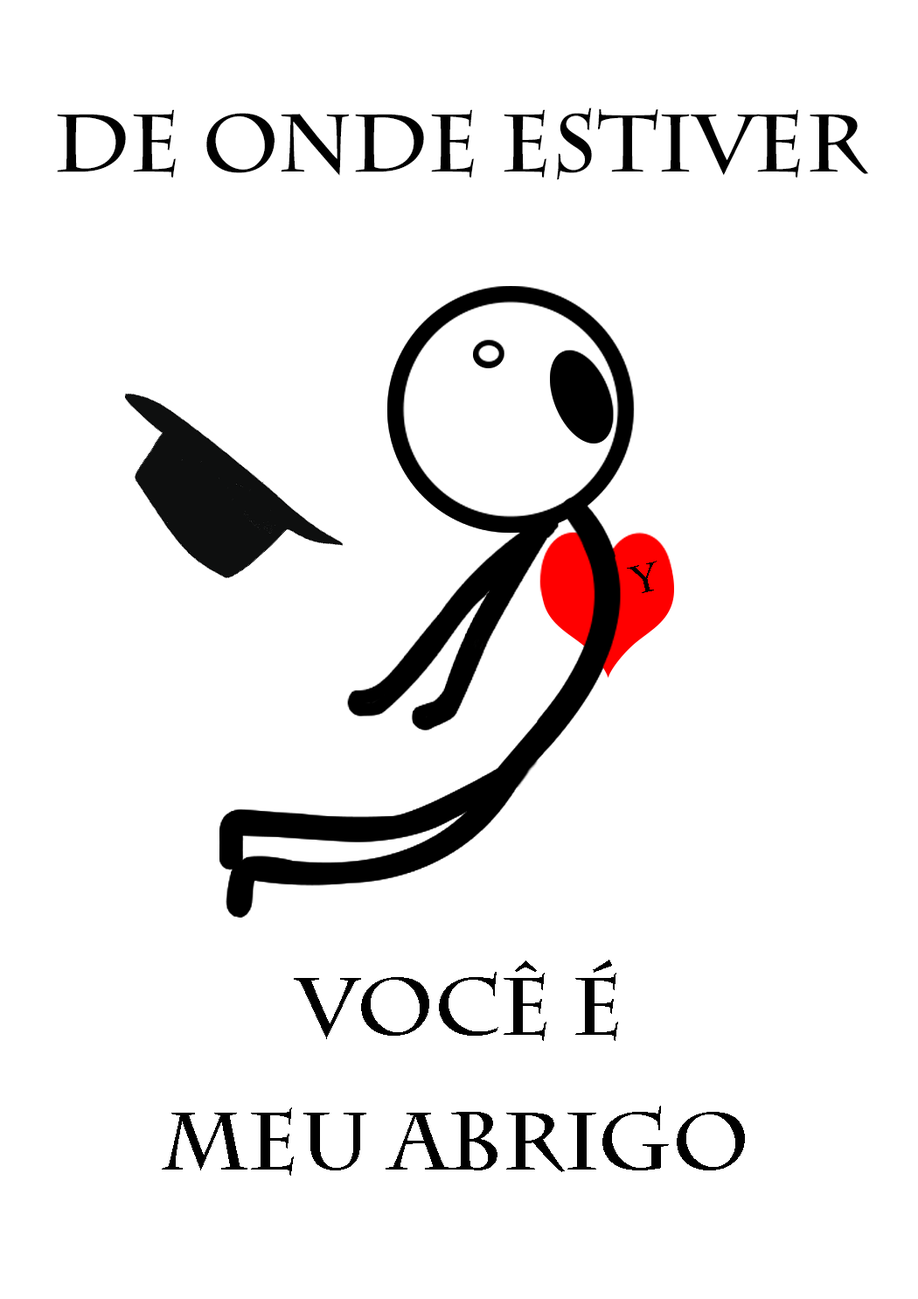
<style>
.page{position:relative;width:918px;height:1299px;background:#ffffff}
.page>*{position:absolute;margin:0}
.t1{font:81.3px "CharlemagneStd-Bold";color:#000000}
.t2{font:39.7px "CharlemagneStd-Bold";color:#000000}
</style>
<div class="page">
<p class="t1" style="left:57px;top:108px;width:812px;height:72px">De onde estiver</p>
<p class="t2" style="left:627px;top:561px;width:30px;height:32px;rotate:-13deg">Y</p>
<p class="t1" style="left:294px;top:959px;width:324px;height:82px">Você É</p>
<p class="t1" style="left:162px;top:1105px;width:583px;height:70px">Meu Abrigo</p>
</div>
